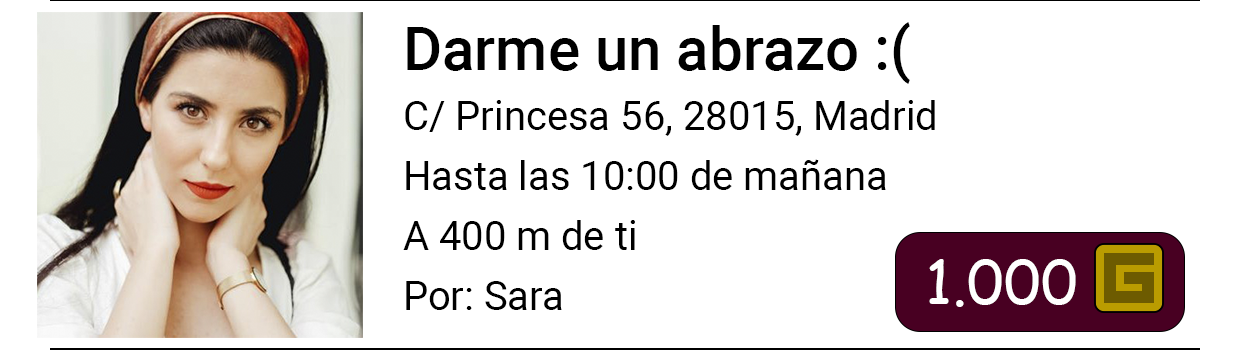
<style>
.page{position:relative;width:1250px;height:350px;background:#ffffff}
.page>*{position:absolute;margin:0}
.t1{font:40px "Roboto-Regular";color:#000000}
.t2{font:60px "Roboto-Medium";color:#000000}
.t3{font:60px "ComicSansMS";color:#ffffff}
</style>
<div class="page">
<p class="t1" style="left:403px;top:22px;width:532px;height:288px"><span class="t2">Darme un abrazo :(<br><br></span>C/ Princesa 56, 28015, Madrid<br><br>Hasta las 10:00 de mañana<br><br>A 400 m de ti<br><br>Por: Sara</p>
<p class="t3" style="left:929px;top:259px;width:147px;height:48px">1.000</p>
</div>
